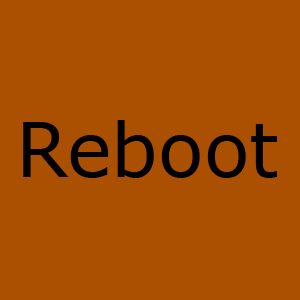
<style>
.page{position:relative;width:300px;height:300px;background:#ab5000}
.page>*{position:absolute;margin:0}
.t1{font:75px "Verdana";color:#000000}
</style>
<div class="page">
<p class="t1" style="left:23px;top:120px;width:254px;height:58px">Reboot</p>
</div>
